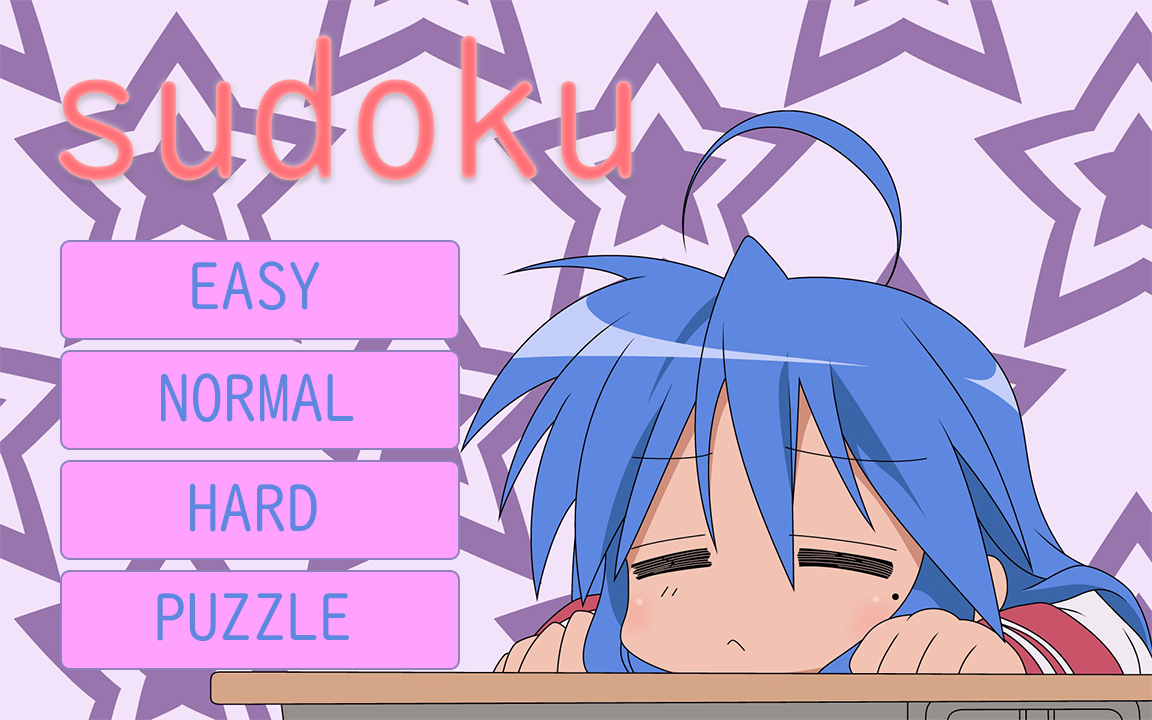
<style>
.page{position:relative;width:1152px;height:720px;background:#f2e3fa}
.page>*{position:absolute;margin:0}
.t1{font:200px "UDDigiKyokashoN-R";color:#ff6f76}
.t2{font:66.7px "UDDigiKyokashoN-R";color:#5e87df}
</style>
<div class="page">
<p class="t1" style="left:58px;top:35px;width:574px;height:146px">sudoku</p>
<p class="t2" style="left:192px;top:261px;width:128px;height:49px">EASY</p>
<p class="t2" style="left:161px;top:373px;width:193px;height:49px">NORMAL</p>
<p class="t2" style="left:190px;top:483px;width:127px;height:49px">HARD</p>
<p class="t2" style="left:157px;top:593px;width:192px;height:48px">PUZZLE</p>
</div>
